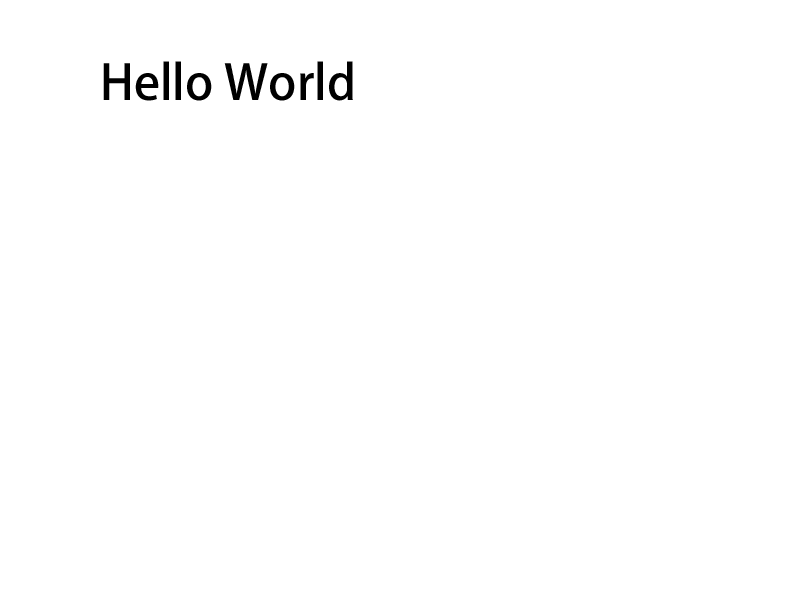
<style>
.page{position:relative;width:800px;height:600px;background:#ffffff}
.page>*{position:absolute;margin:0}
.t1{font:48px "AdobeHeitiStd-Regular";color:#000000}
</style>
<div class="page">
<p class="t1" style="left:103px;top:61px;width:250px;height:40px">Hello World</p>
</div>
